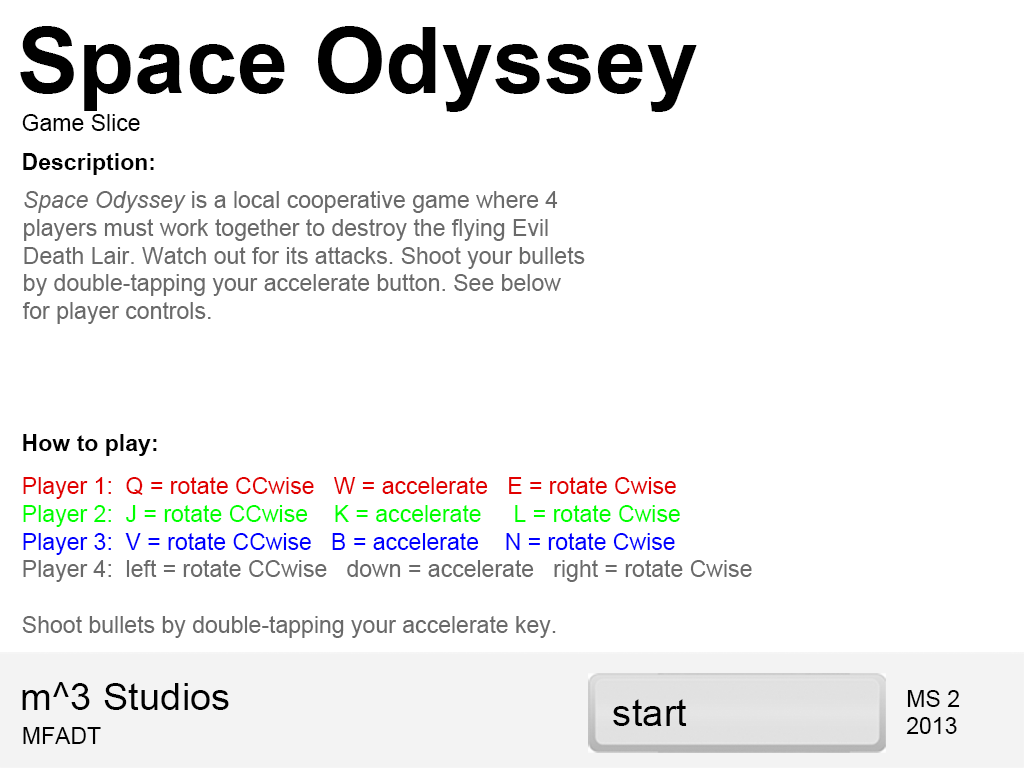
<style>
.page{position:relative;width:1024px;height:768px;background:#ffffff}
.page>*{position:absolute;margin:0}
.t1{font:92.2px "Arial-BoldMT";color:#000000}
.t2{font:23px "ArialMT";color:#000000}
.t3{font:23px "Arial-BoldMT";color:#000000}
.t4{font:23px "ArialMT";color:#6a6a6a}
.t5{font:23px "Arial-ItalicMT";color:#6a6a6a}
.t6{font:23px "ArialMT";color:#e10000}
.t7{font:23px "ArialMT";color:#00ff00}
.t8{font:23px "ArialMT";color:#0000ff}
.t9{font:38.4px "ArialMT";color:#000000}
</style>
<div class="page">
<p class="t1" style="left:20px;top:26px;width:677px;height:86px">Space Odyssey</p>
<p class="t2" style="left:22px;top:114px;width:118px;height:17px">Game Slice</p>
<p class="t3" style="left:23px;top:153px;width:131px;height:22px">Description:</p>
<p class="t4" style="left:22px;top:191px;width:563px;height:133px"><span class="t5">Space Odyssey </span>is a local cooperative game where 4 players must work together to destroy the flying Evil Death Lair. Watch out for its attacks. Shoot your bullets by double-tapping your accelerate button. See below for player controls.</p>
<p class="t3" style="left:23px;top:434px;width:134px;height:22px">How to play:</p>
<p class="t4" style="left:22px;top:477px;width:730px;height:161px"><span class="t6">Player 1:  Q = rotate CCwise   W = accelerate   E = rotate Cwise<br></span><span class="t7">Player 2:  J = rotate CCwise    K = accelerate     L = rotate Cwise<br></span><span class="t8">Player 3:  V = rotate CCwise   B = accelerate    N = rotate Cwise<br></span>Player 4:  left = rotate CCwise   down = accelerate   right = rotate Cwise<br><br>Shoot bullets by double-tapping your accelerate key.</p>
<p class="t9" style="left:22px;top:682px;width:207px;height:28px">m^3 Studios</p>
<p class="t9" style="left:613px;top:699px;width:74px;height:27px">start</p>
<p class="t2" style="left:906px;top:690px;width:54px;height:44px">MS 2<br>2013</p>
<p class="t2" style="left:23px;top:727px;width:78px;height:17px">MFADT</p>
</div>
